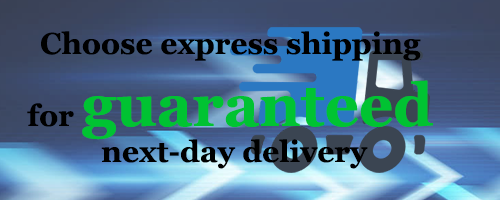
<style>
.page{position:relative;width:500px;height:200px}
.page>*{position:absolute;margin:0}
.t1{font:30px "Vani-Bold";color:#000000}
.t2{font:30px "Vani-Bold";color:#00c332}
.t3{font:60px "Vani-Bold";color:#00c332}
</style>
<div class="page">
<p class="t1" style="left:27px;top:31px;width:406px;height:138px;text-align:center">Choose express shipping<span class="t2"> <br></span>for <span class="t3">guaranteed <br></span>next-day delivery</p>
</div>
